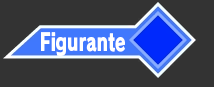
<style>
.page{position:relative;width:214px;height:87px;background:#333333}
.page>*{position:absolute;margin:0}
.t1{font:24px "RodinPro-EB";color:#ffffff;scale:0.71 1}
</style>
<div class="page">
<p class="t1" style="left:41px;top:32px;width:84px;height:24px">Figurante</p>
</div>
